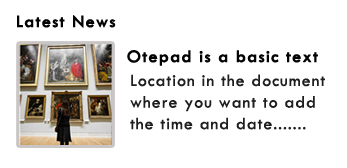
<style>
.page{position:relative;width:347px;height:168px;background:#ffffff}
.page>*{position:absolute;margin:0}
.t1{font:18px "TwCenMT-Regular";letter-spacing:0.05em;color:#030303;font-weight:bold}
.t2{font:18px "TwCenMT-Regular";letter-spacing:0.05em;color:#1e1e1e}
</style>
<div class="page">
<p class="t1" style="left:17px;top:15px;width:99px;height:13px">Latest News</p>
<p class="t1" style="left:127px;top:50px;width:191px;height:16px">Otepad is a basic text</p>
<p class="t2" style="left:130px;top:74px;width:195px;height:56px">Location in the document <br>where you want to add <br>the time and date.......</p>
</div>
